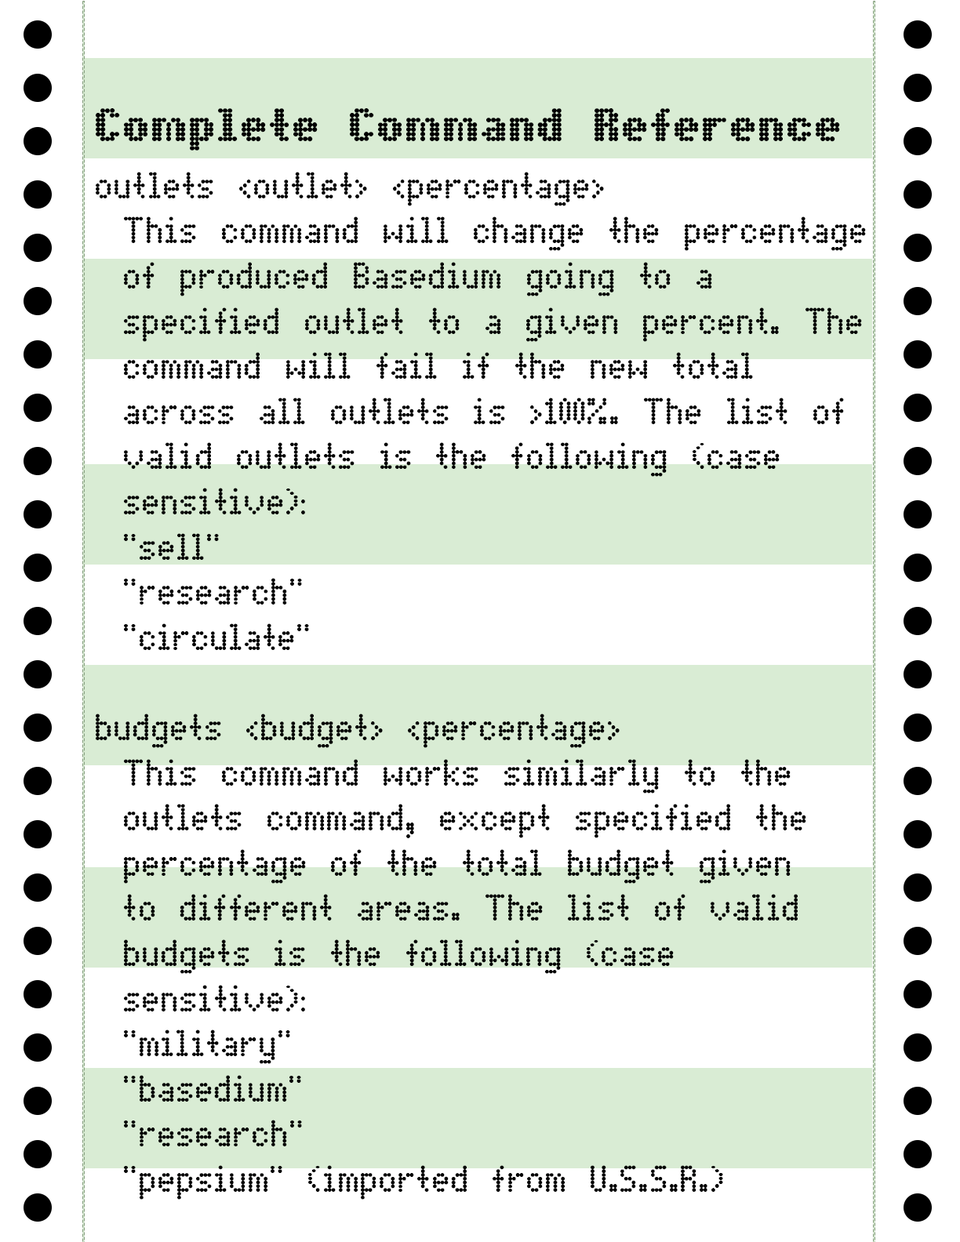
<style>
.page{position:relative;width:960px;height:1242px;background:#ffffff}
.page>*{position:absolute;margin:0}
.t1{font:47.1px "DotMatrixBold";color:#000000}
.t2{font:37.6px "DotMatrix";color:#000000}
</style>
<div class="page">
<p class="t1" style="left:96px;top:108px;width:744px;height:43px">Complete Command Reference</p>
<p class="t2" style="left:96px;top:172px;width:770px;height:1028px">outlets &lt;outlet&gt; &lt;percentage&gt;<br> This command will change the percentage<br> of produced Basedium going to a<br> specified outlet to a given percent. The<br> command will fail if the new total<br> across all outlets is &gt;100%. The list of<br> valid outlets is the following (case<br> sensitive):<br> "sell"<br> "research"<br> "circulate"<br><br>budgets &lt;budget&gt; &lt;percentage&gt;<br> This command works similarly to the<br> outlets command, except specified the<br> percentage of the total budget given<br> to different areas. The list of valid<br> budgets is the following (case<br> sensitive):<br> "military"<br> "basedium"<br> "research"<br> "pepsium" (imported from U.S.S.R.)</p>
</div>
